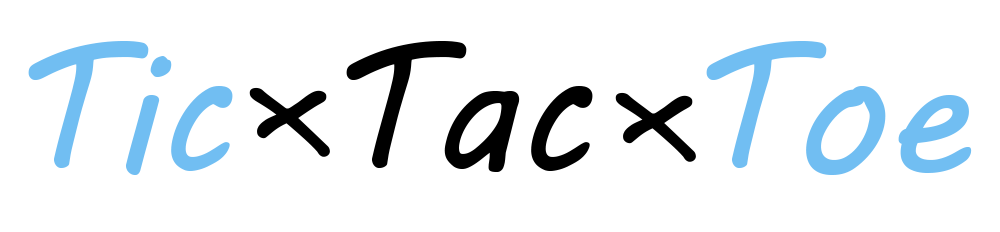
<style>
.page{position:relative;width:1000px;height:232px;background:#ffffff}
.page>*{position:absolute;margin:0}
.t1{font:176.2px "MVBoli";color:#71bef2}
.t2{font:176.2px "MVBoli";color:#000000}
.t3{font:150px "MVBoli";color:#000000}
</style>
<div class="page">
<p class="t1" style="left:28px;top:41px;width:944px;height:134px"><span class="t2"><br></span>Tic<span class="t2"> Tac </span>Toe</p>
<p class="t3" style="left:249px;top:87px;width:81px;height:70px;rotate:-98deg">x</p>
<p class="t3" style="left:615px;top:92px;width:81px;height:70px;rotate:-98deg">x</p>
</div>
